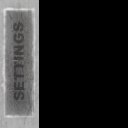
<style>
.page{position:relative;width:128px;height:128px;background:#000000}
.page>*{position:absolute;margin:0}
.t1{font:14px "Arial-Black";color:#434141}
</style>
<div class="page">
<p class="t1" style="left:13px;top:22px;width:12px;height:79px;rotate:-90deg">SETTINGS</p>
</div>
